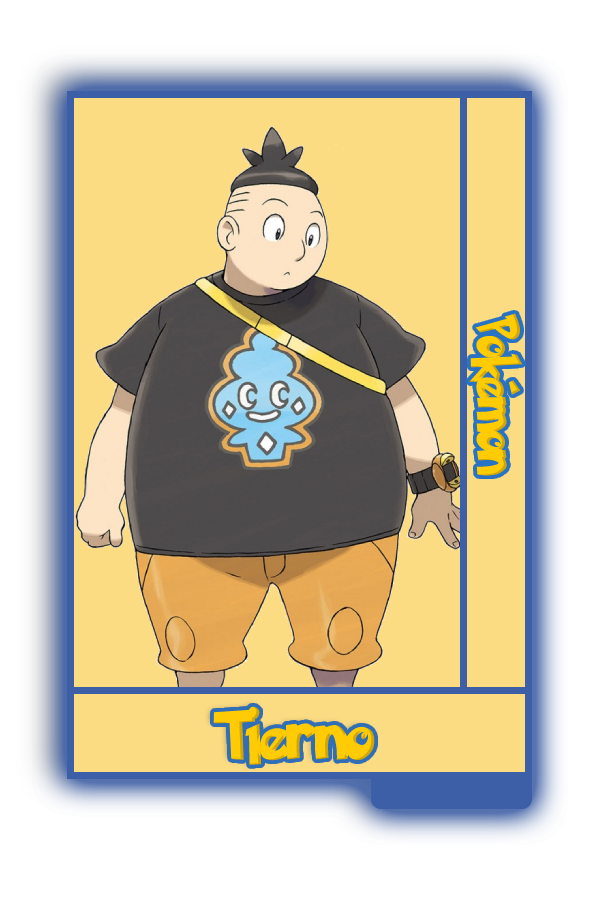
<style>
.page{position:relative;width:600px;height:900px;background:#fbdc83}
.page>*{position:absolute;margin:0}
.t1{font:48.8px "PokemonSolidNormal";color:#ffcb05;scale:0.8 1}
.t2{font:56.6px "PokemonSolidNormal";color:#ffcb05;scale:0.92 1}
</style>
<div class="page">
<p class="t1" style="left:469px;top:313px;width:54px;height:163px;rotate:90deg">Pokémon</p>
<p class="t2" style="left:213px;top:706px;width:162px;height:59px">Tierno</p>
</div>
